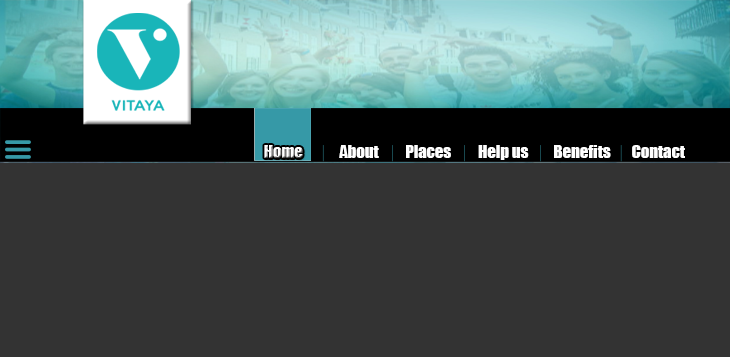
<style>
.page{position:relative;width:730px;height:357px;background:#333333}
.page>*{position:absolute;margin:0}
.t1{font:16.6px "Impact";color:#ffffff}
</style>
<div class="page">
<p class="t1" style="left:264px;top:145px;width:39px;height:13px">Home</p>
<p class="t1" style="left:339px;top:145px;width:40px;height:13px">About</p>
<p class="t1" style="left:406px;top:145px;width:45px;height:13px">Places</p>
<p class="t1" style="left:478px;top:145px;width:51px;height:15px">Help us</p>
<p class="t1" style="left:554px;top:145px;width:57px;height:13px">Benefits</p>
<p class="t1" style="left:632px;top:145px;width:53px;height:13px">Contact</p>
</div>
